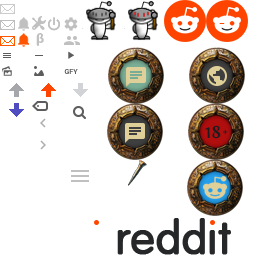
<style>
.page{position:relative;width:256px;height:264px;background:#ffffff}
.page>*{position:absolute;margin:0}
.t1{font:14px "MyriadPro-Bold";color:#c0c0c0}
.t2{font:7px "Roboto-Bold";color:#5d5d5d}
.t3{font:18px "Fontin-Bold";color:#1a1c1f}
.t4{font:12px "Fontin-Bold"}
</style>
<div class="page">
<p class="t1" style="left:36px;top:33px;width:8px;height:13px">β</p>
<p class="t2" style="left:64px;top:69px;width:14px;height:5px">GFY</p>
<p class="t3" style="left:205px;top:125px;width:16px;height:14px">18</p>
<p class="t4" style="left:223px;top:129px;width:5px;height:6px">+</p>
</div>
